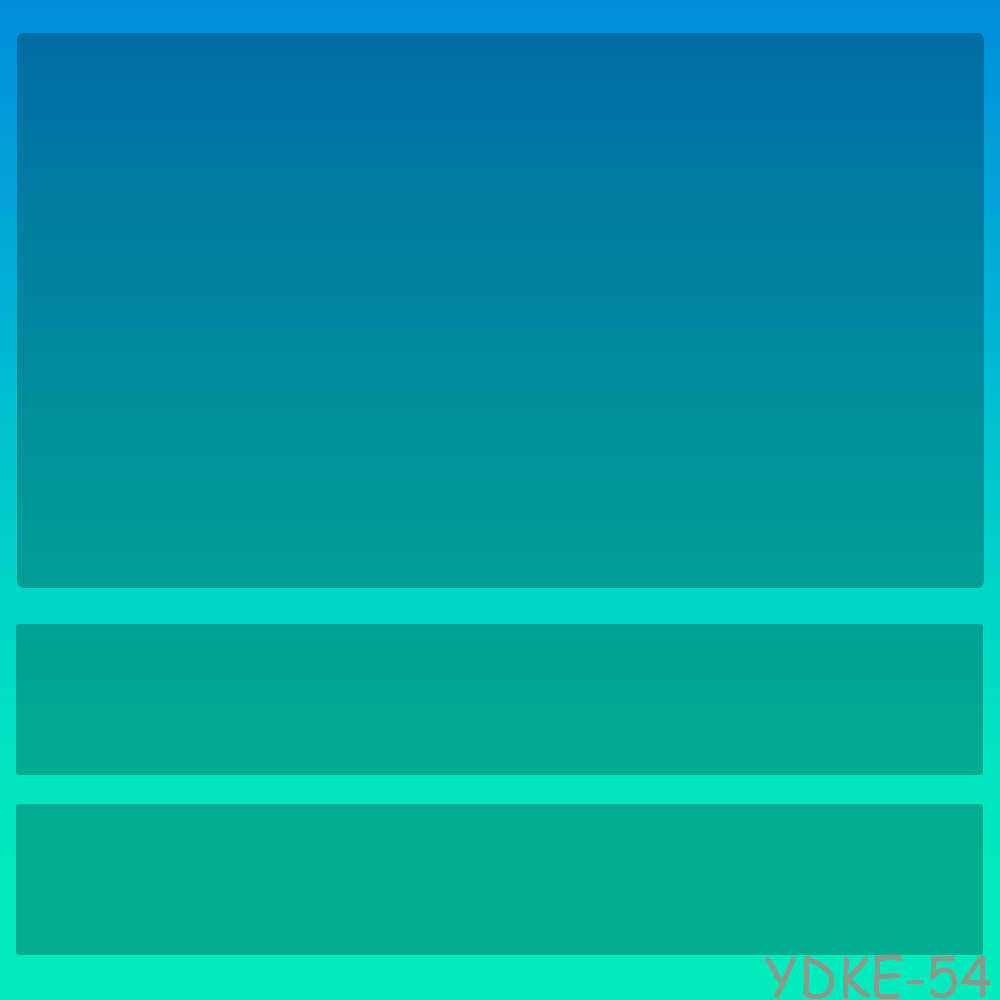
<style>
.page{position:relative;width:1000px;height:1000px}
.page>*{position:absolute;margin:0}
.t1{font:54px "ComicSansMS";color:#7ba08d;text-transform:uppercase}
</style>
<div class="page">
<p class="t1" style="left:764px;top:954px;width:227px;height:46px">Ydke-54</p>
</div>
